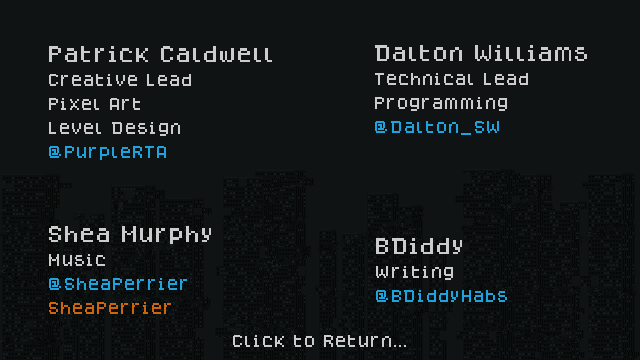
<style>
.page{position:relative;width:640px;height:360px;background:#0f1313}
.page>*{position:absolute;margin:0}
.t1{font:14px/24px "Dogica_Pixel";color:#cccccc}
.t2{font:18px/24px "Dogica_Pixel";color:#cccccc}
.t3{font:14px/24px "Dogica_Pixel";color:#1da4de}
.t4{font:14px/24px "Dogica_Pixel";color:#cc660d}
.t5{font:14px "Dogica_Pixel";color:#cccccc}
</style>
<div class="page">
<p class="t1" style="left:49px;top:46px;width:223px;height:114px"><span class="t2">Patrick Caldwell<br></span>Creative Lead<br>Pixel Art<br>Level Design<br><span class="t3">@PurpleRTA</span></p>
<p class="t1" style="left:375px;top:45px;width:212px;height:90px"><span class="t2">Dalton Williams<br></span>Technical Lead<br>Programming<br><span class="t3">@Dalton_SW</span></p>
<p class="t3" style="left:49px;top:226px;width:162px;height:88px"><span class="t2">Shea Murphy<br></span><span class="t1">Music<br></span>@SheaPerrier<br><span class="t4">SheaPerrier</span></p>
<p class="t3" style="left:376px;top:238px;width:131px;height:64px"><span class="t2">BDiddy<br></span><span class="t1">Writing<br></span>@BDiddyHabs</p>
<p class="t5" style="left:233px;top:335px;width:173px;height:12px">Click to Return...</p>
</div>
